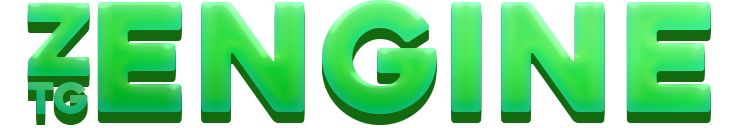
<style>
.page{position:relative;width:733px;height:128px;background:#ffffff}
.page>*{position:absolute;margin:0}
.t1{font:150px "Heavitas"}
</style>
<div class="page">
<p class="t1" style="left:97px;top:0px;width:614px;height:114px">ENGINE</p>
</div>
